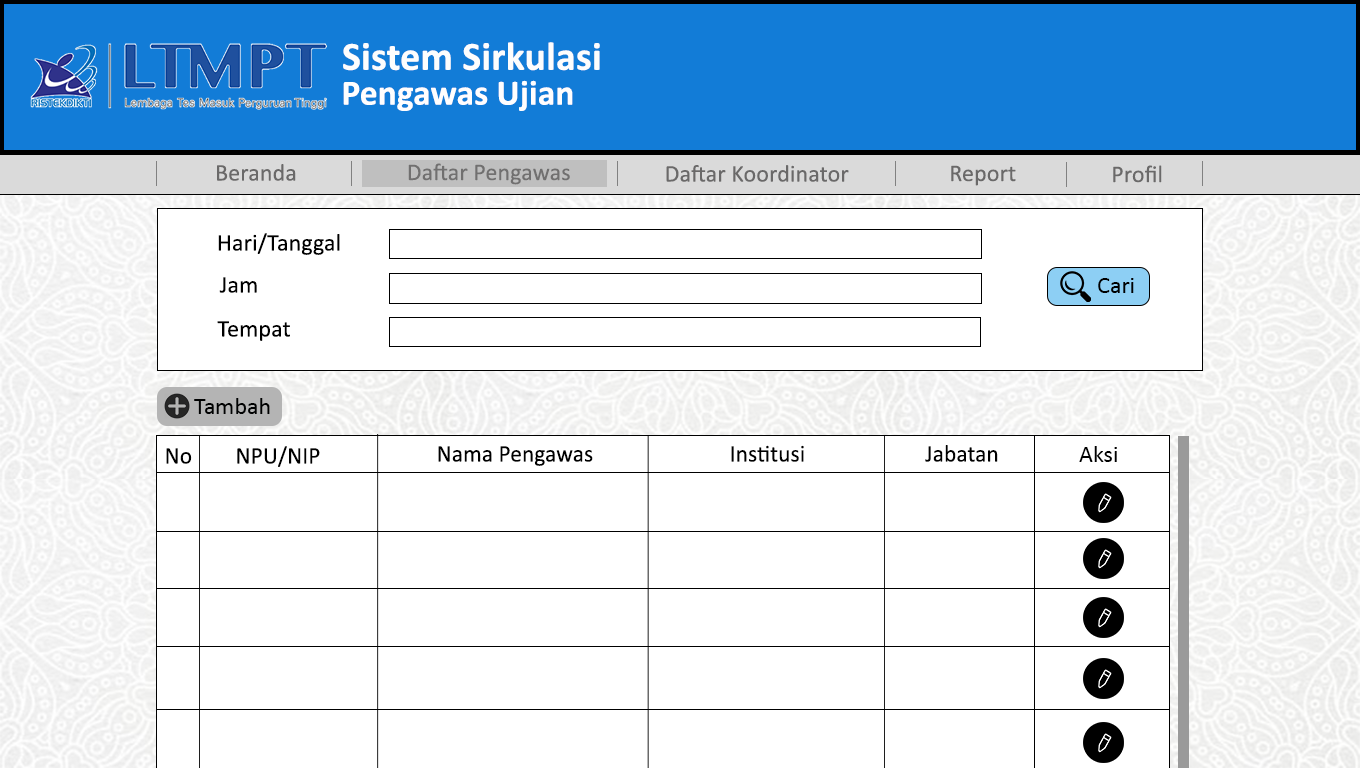
<style>
.page{position:relative;width:1360px;height:768px;background:#ffffff}
.page>*{position:absolute;margin:0}
.t1{font:40.1px "Calibri-Bold";letter-spacing:0.005em;color:#fdfdfd}
.t2{font:35.6px "Calibri-Bold";letter-spacing:0.005em;color:#fffefe}
.t3{font:24px "Calibri";letter-spacing:0.005em;color:#6a6969}
.t4{font:24px "Calibri";letter-spacing:0.005em;color:#000000}
.t5{font:24px "Calibri";color:#000101}
.t6{font:24px "Calibri";color:#000000}
</style>
<div class="page">
<p class="t1" style="left:343px;top:42px;width:257px;height:29px">Sistem Sirkulasi</p>
<p class="t2" style="left:343px;top:80px;width:230px;height:31px">Pengawas Ujian</p>
<p class="t3" style="left:217px;top:164px;width:79px;height:17px">Beranda</p>
<p class="t3" style="left:408px;top:163px;width:162px;height:22px">Daftar Pengawas</p>
<p class="t3" style="left:666px;top:165px;width:183px;height:17px">Daftar Koordinator</p>
<p class="t3" style="left:951px;top:165px;width:65px;height:21px">Report</p>
<p class="t3" style="left:1113px;top:165px;width:49px;height:18px">Profil</p>
<p class="t4" style="left:218px;top:233px;width:122px;height:22px">Hari/Tanggal</p>
<p class="t4" style="left:219px;top:277px;width:38px;height:16px">Jam</p>
<p class="t4" style="left:217px;top:321px;width:73px;height:20px">Tempat</p>
<p class="t5" style="left:194px;top:398px;width:76px;height:16px">Tambah</p>
<p class="t4" style="left:166px;top:448px;width:26px;height:16px">No</p>
<p class="t4" style="left:237px;top:446px;width:83px;height:21px">NPU/NIP</p>
<p class="t4" style="left:438px;top:446px;width:155px;height:20px">Nama Pengawas</p>
<p class="t4" style="left:731px;top:445px;width:73px;height:17px">Institusi</p>
<p class="t4" style="left:925px;top:445px;width:73px;height:17px">Jabatan</p>
<p class="t6" style="left:1079px;top:446px;width:38px;height:16px">Aksi</p>
</div>
